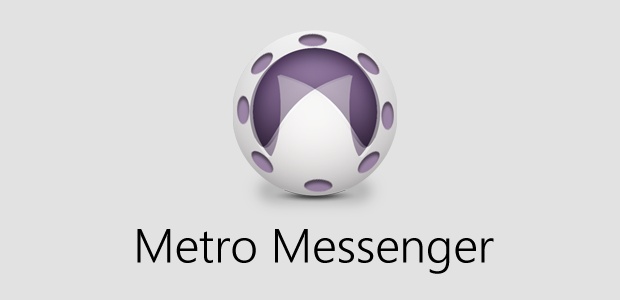
<style>
.page{position:relative;width:620px;height:300px;background:#e2e2e2}
.page>*{position:absolute;margin:0}
.t1{font:47.7px "SegoeUI-Semilight";color:#000000}
</style>
<div class="page">
<p class="t1" style="left:137px;top:229px;width:357px;height:45px">Metro Messenger</p>
</div>
